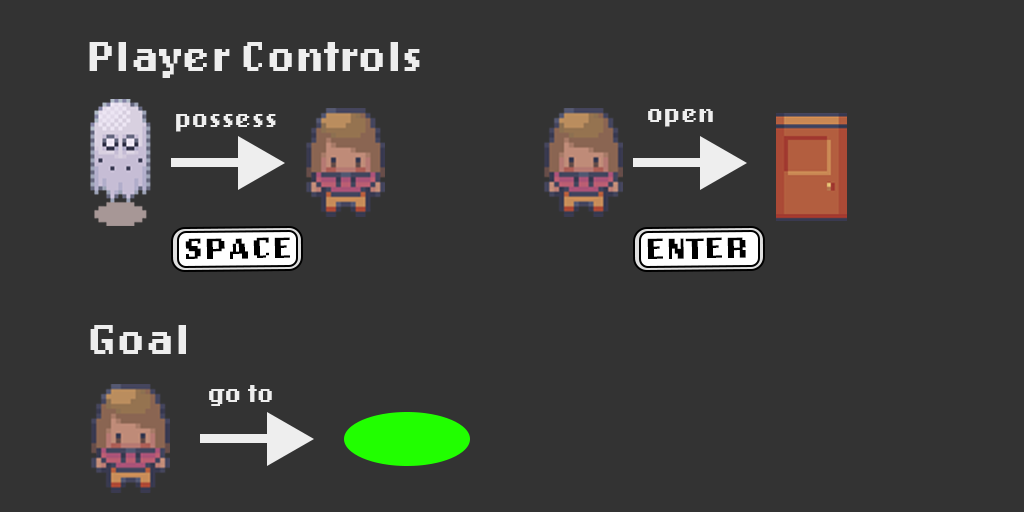
<style>
.page{position:relative;width:1024px;height:512px;background:#333333}
.page>*{position:absolute;margin:0}
.t1{font:44px "LoRes12OT-Bold";color:#eeeeee}
.t2{font:25.9px "LoRes12OT-Bold";color:#eeeeee}
.t3{font:30.3px "LoRes12OT-Bold";color:#000000;scale:1.18 1}
</style>
<div class="page">
<p class="t1" style="left:89px;top:42px;width:331px;height:36px">Player Controls</p>
<p class="t2" style="left:648px;top:109px;width:65px;height:18px">open</p>
<p class="t2" style="left:176px;top:114px;width:100px;height:18px">possess</p>
<p class="t3" style="left:185px;top:237px;width:105px;height:22px;rotate:-1deg">SPACE</p>
<p class="t3" style="left:647px;top:237px;width:99px;height:22px;rotate:-1deg">ENTER</p>
<p class="t1" style="left:90px;top:325px;width:96px;height:29px">Goal</p>
<p class="t2" style="left:209px;top:385px;width:63px;height:21px">go to</p>
</div>
